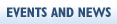
<style>
.page{position:relative;width:117px;height:24px}
.page>*{position:absolute;margin:0}
.t1{font:14px "Humanist521BT-BoldCondensed";color:#2d5078}
</style>
<div class="page">
<p class="t1" style="left:7px;top:7px;width:104px;height:11px">EVENTS AND NEWS</p>
</div>
